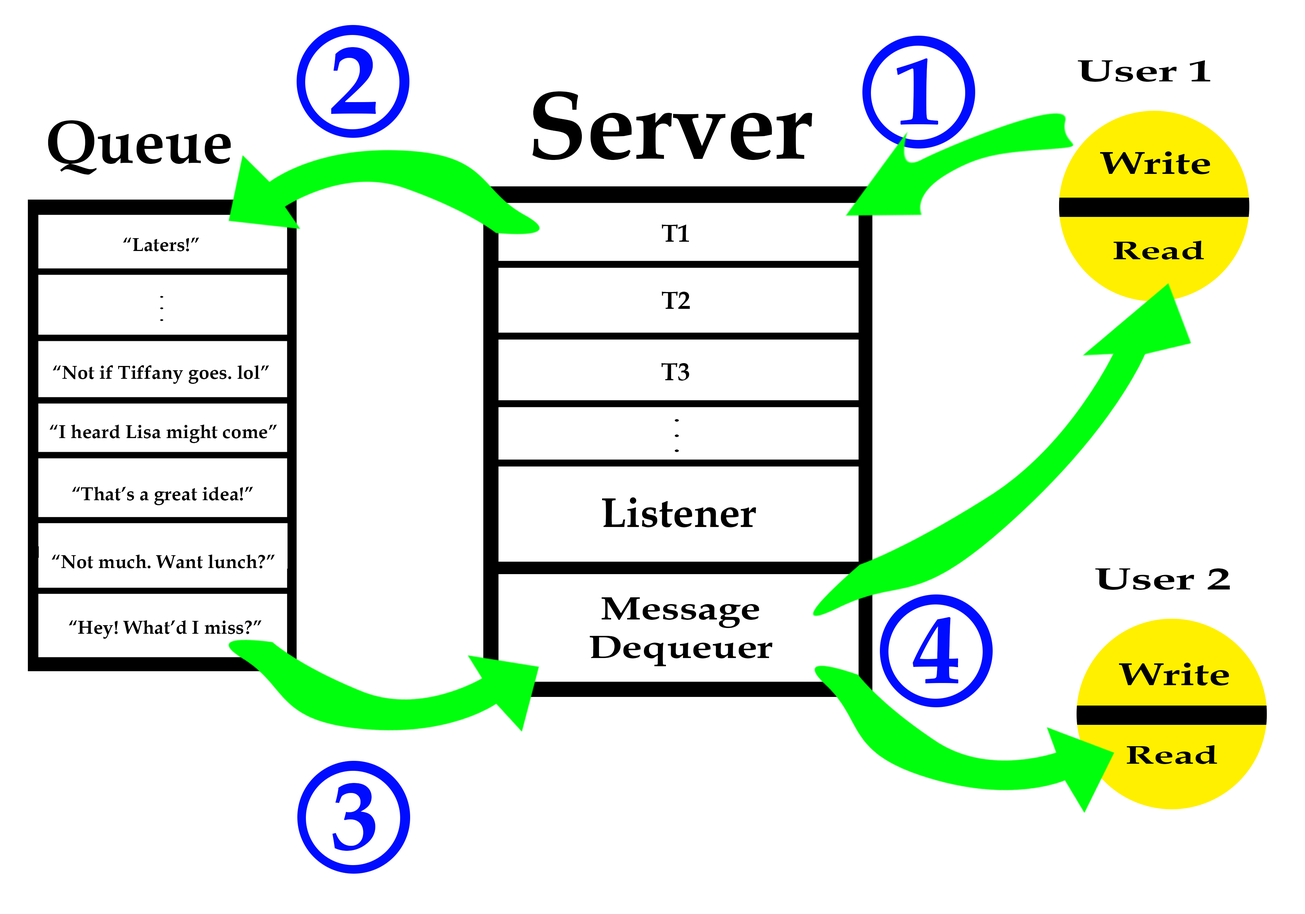
<style>
.page{position:relative;width:1305px;height:914px;background:#ffffff}
.page>*{position:absolute;margin:0}
.t1{font:96.4px "BookAntiqua-Bold";color:#000cff}
.t2{font:30.9px "BookAntiqua-Bold";color:#000000;scale:1.55 1}
.t3{font:97.1px "BookAntiqua-Bold";color:#000000}
.t4{font:61.4px "BookAntiqua-Bold";color:#000000}
.t5{font:31.8px "BookAntiqua-Bold";color:#000000;scale:1.36 1}
.t6{font:24.8px "BookAntiqua-Bold";color:#000000}
.t7{font:19px "BookAntiqua-Bold";color:#000000}
.t8{font:25.7px "BookAntiqua-Bold";color:#000000;scale:1.54 1}
.t9{font:11.6px "BookAntiqua-Bold";color:#000000;scale:1.73 1}
.t10{font:15.2px "BookAntiqua-Bold";color:#000000;scale:1.73 1}
.t11{font:41.9px "BookAntiqua-Bold";color:#000000}
.t12{font:32.4px "BookAntiqua-Bold";color:#000000;scale:1.25 1}
</style>
<div class="page">
<p class="t1" style="left:331px;top:47px;width:45px;height:67px">2</p>
<p class="t1" style="left:896px;top:58px;width:42px;height:67px">1</p>
<p class="t2" style="left:1078px;top:60px;width:132px;height:22px">User 1</p>
<p class="t3" style="left:532px;top:91px;width:280px;height:69px">Server</p>
<p class="t4" style="left:48px;top:120px;width:183px;height:55px">Queue</p>
<p class="t5" style="left:1100px;top:151px;width:110px;height:23px">Write</p>
<p class="t6" style="left:662px;top:225px;width:27px;height:17px">T1</p>
<p class="t7" style="left:123px;top:237px;width:76px;height:14px">“Laters!”</p>
<p class="t8" style="left:1113px;top:241px;width:91px;height:18px">Read</p>
<p class="t6" style="left:662px;top:292px;width:28px;height:17px">T2</p>
<p class="t9" style="left:160px;top:296px;width:3px;height:25px">...</p>
<p class="t7" style="left:53px;top:365px;width:216px;height:19px">“Not if Tiffany goes. lol”</p>
<p class="t6" style="left:661px;top:363px;width:28px;height:17px">T3</p>
<p class="t7" style="left:50px;top:424px;width:227px;height:19px">“I heard Lisa might come”</p>
<p class="t10" style="left:675px;top:419px;width:4px;height:33px">...</p>
<p class="t7" style="left:72px;top:487px;width:181px;height:18px">“That’s a great idea!”</p>
<p class="t11" style="left:602px;top:497px;width:154px;height:30px">Listener</p>
<p class="t7" style="left:52px;top:554px;width:223px;height:15px">“Not much. Want lunch?”</p>
<p class="t2" style="left:1095px;top:568px;width:135px;height:22px">User 2</p>
<p class="t12" style="left:590px;top:597px;width:182px;height:69px;text-align:center">Message<br>Dequeuer</p>
<p class="t1" style="left:913px;top:617px;width:45px;height:66px">4</p>
<p class="t7" style="left:69px;top:620px;width:193px;height:19px">“Hey! What’d I miss?”</p>
<p class="t5" style="left:1119px;top:662px;width:110px;height:23px">Write</p>
<p class="t8" style="left:1126px;top:745px;width:91px;height:19px">Read</p>
<p class="t1" style="left:332px;top:783px;width:43px;height:68px">3</p>
</div>
